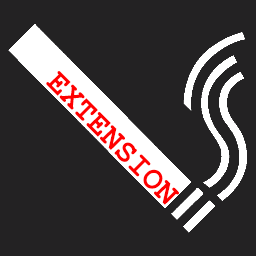
<style>
.page{position:relative;width:256px;height:256px;background:#232223}
.page>*{position:absolute;margin:0}
.t1{font:32px "CourierNewPS-BoldMT";color:#ff0000;text-transform:uppercase}
</style>
<div class="page">
<p class="t1" style="left:46px;top:71px;width:133px;height:134px;rotate:45deg">extension</p>
</div>
